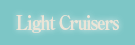
<style>
.page{position:relative;width:135px;height:45px;background:#7dc6c6}
.page>*{position:absolute;margin:0}
.t1{font:20px "RyuminPro-ExBold";letter-spacing:-0.08em;color:#f1e6d8;scale:0.9 1}
</style>
<div class="page">
<p class="t1" style="left:16px;top:15px;width:103px;height:18px">Light Cruisers</p>
</div>
